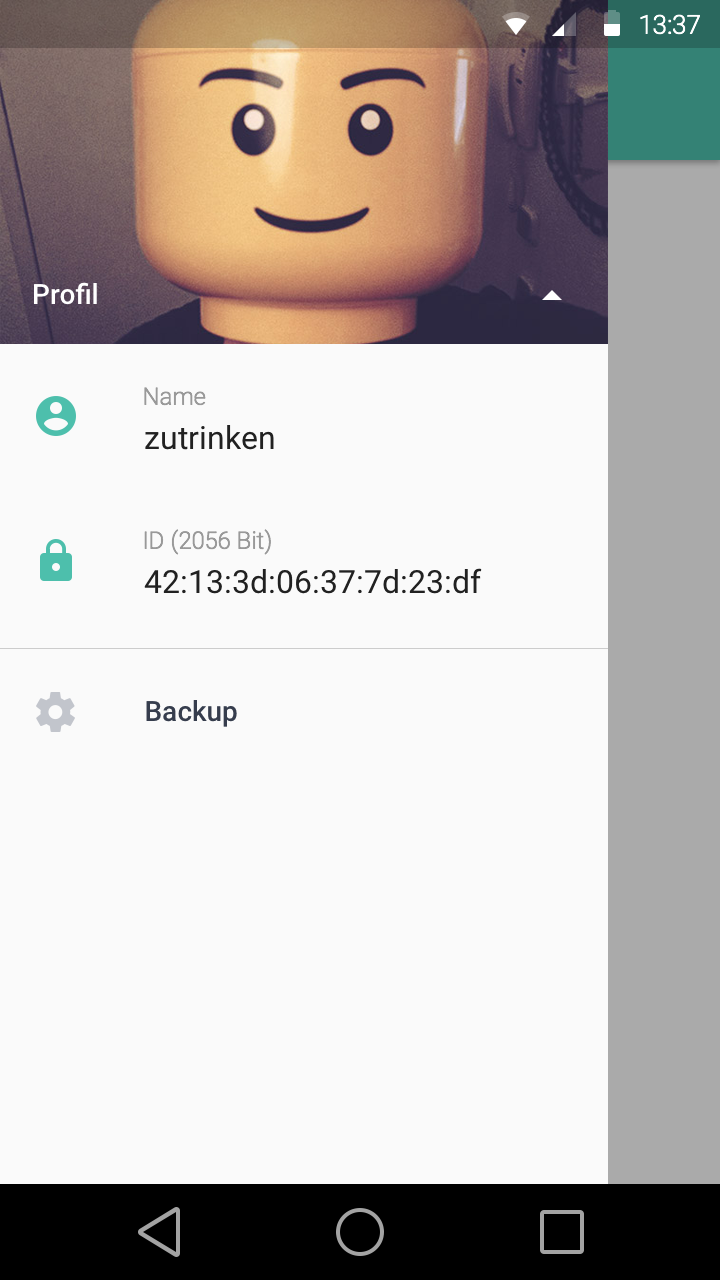
<style>
.page{position:relative;width:720px;height:1280px;background:#fafafa}
.page>*{position:absolute;margin:0}
.t1{font:28px "Roboto-Medium";color:#ffffff}
.t2{font:24px "Roboto-Light";color:#999999}
.t3{font:32px "Roboto-Regular";color:#212121}
.t4{font:28px "Roboto-Medium";color:#363d4d}
</style>
<div class="page">
<p class="t1" style="left:34px;top:282px;width:63px;height:23px">Profil</p>
<p class="t2" style="left:144px;top:387px;width:62px;height:19px">Name</p>
<p class="t3" style="left:145px;top:425px;width:129px;height:25px">zutrinken</p>
<p class="t2" style="left:144px;top:529px;width:127px;height:26px">ID (2056 Bit)</p>
<p class="t3" style="left:144px;top:568px;width:338px;height:26px">42:13:3d:06:37:7d:23:df</p>
<p class="t4" style="left:146px;top:700px;width:91px;height:27px">Backup</p>
</div>
